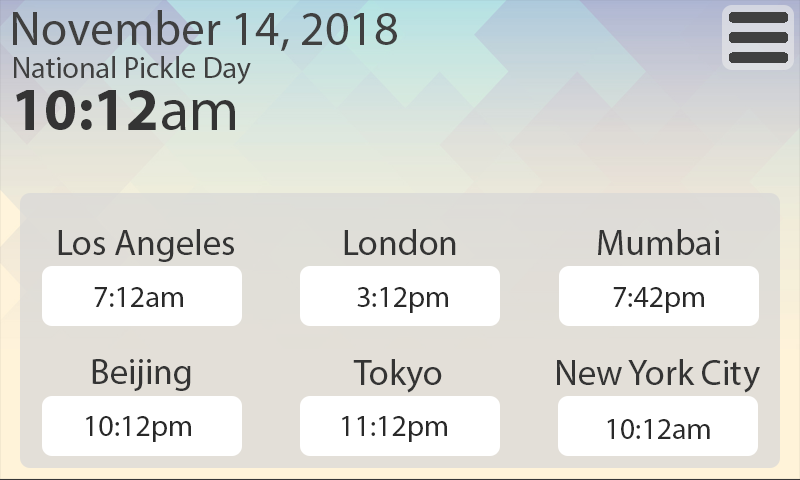
<style>
.page{position:relative;width:800px;height:480px}
.page>*{position:absolute;margin:0}
.t1{font:48px "MyriadPro-Regular";color:#404040}
.t2{font:30px "MyriadPro-Regular";color:#404040}
.t3{font:60px "MyriadPro-Bold";color:#343434}
.t4{font:60px "MyriadPro-Regular";color:#343434}
.t5{font:36px "MyriadPro-Regular";color:#343434}
.t6{font:30px "MyriadPro-Regular";color:#292929}
</style>
<div class="page">
<p class="t1" style="left:13px;top:10px;width:384px;height:41px">November 14, 2018</p>
<p class="t2" style="left:14px;top:56px;width:237px;height:29px">National Pickle Day</p>
<p class="t3" style="left:16px;top:90px;width:219px;height:40px">10:12<span class="t4">am</span></p>
<p class="t5" style="left:58px;top:229px;width:176px;height:33px">Los Angeles</p>
<p class="t5" style="left:344px;top:229px;width:112px;height:26px">London</p>
<p class="t5" style="left:598px;top:229px;width:121px;height:26px">Mumbai</p>
<p class="t6" style="left:94px;top:287px;width:89px;height:20px">7:12am</p>
<p class="t6" style="left:357px;top:287px;width:91px;height:26px">3:12pm</p>
<p class="t6" style="left:613px;top:287px;width:91px;height:26px">7:42pm</p>
<p class="t5" style="left:92px;top:359px;width:99px;height:32px">Beijing</p>
<p class="t5" style="left:353px;top:359px;width:89px;height:34px">Tokyo</p>
<p class="t5" style="left:557px;top:359px;width:203px;height:34px">New York City</p>
<p class="t6" style="left:86px;top:416px;width:105px;height:26px">10:12pm</p>
<p class="t6" style="left:342px;top:416px;width:105px;height:26px">11:12pm</p>
<p class="t6" style="left:607px;top:419px;width:103px;height:20px">10:12am</p>
</div>
